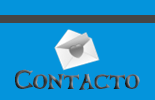
<style>
.page{position:relative;width:155px;height:100px;background:#0494dc}
.page>*{position:absolute;margin:0}
.t1{font:18px "Anfalas";scale:1.17 1}
</style>
<div class="page">
<p class="t1" style="left:15px;top:69px;width:125px;height:21px">Contacto</p>
</div>
